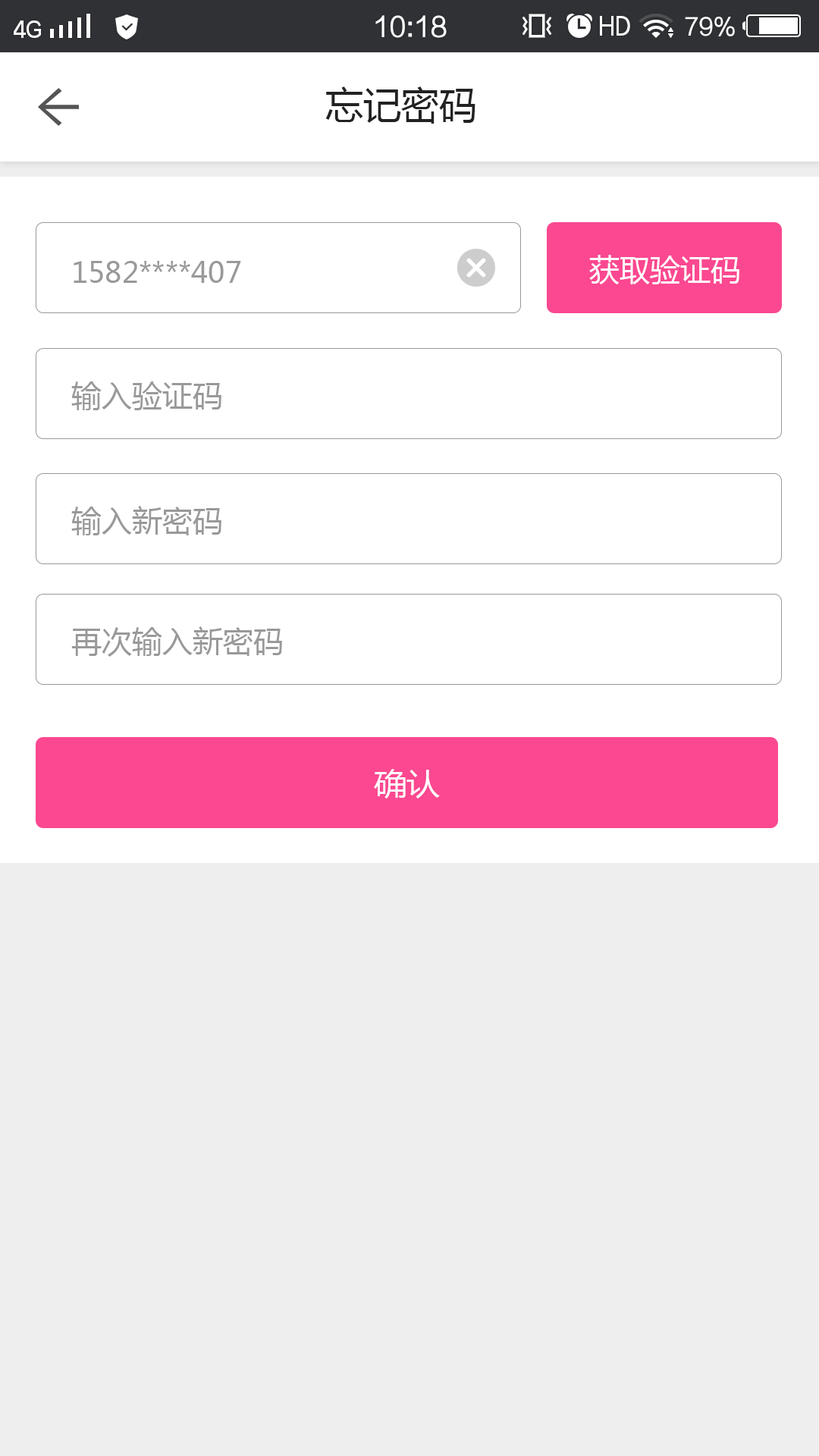
<style>
.page{position:relative;width:819px;height:1456px;background:#ffffff}
.page>*{position:absolute;margin:0}
.t1{font:37.9px "MicrosoftYaHei";color:#222222}
.t2{font:30.3px "MicrosoftYaHei";color:#ffffff}
.t3{font:28.8px "MicrosoftYaHei";color:#999999}
.t4{font:30.3px "MicrosoftYaHei";color:#999999}
.t5{font:30.3px "MicrosoftYaHei";color:#ffffff;scale:1.09 1}
</style>
<div class="page">
<p class="t1" style="left:325px;top:86px;width:150px;height:38px">忘记密码</p>
<p class="t2" style="left:589px;top:255px;width:150px;height:29px">获取验证码</p>
<p class="t3" style="left:74px;top:261px;width:167px;height:22px">1582****407</p>
<p class="t4" style="left:71px;top:381px;width:150px;height:29px">输入验证码</p>
<p class="t4" style="left:71px;top:506px;width:150px;height:29px">输入新密码</p>
<p class="t4" style="left:71px;top:626px;width:211px;height:31px">再次输入新密码</p>
<p class="t5" style="left:374px;top:769px;width:66px;height:30px">确认</p>
</div>
